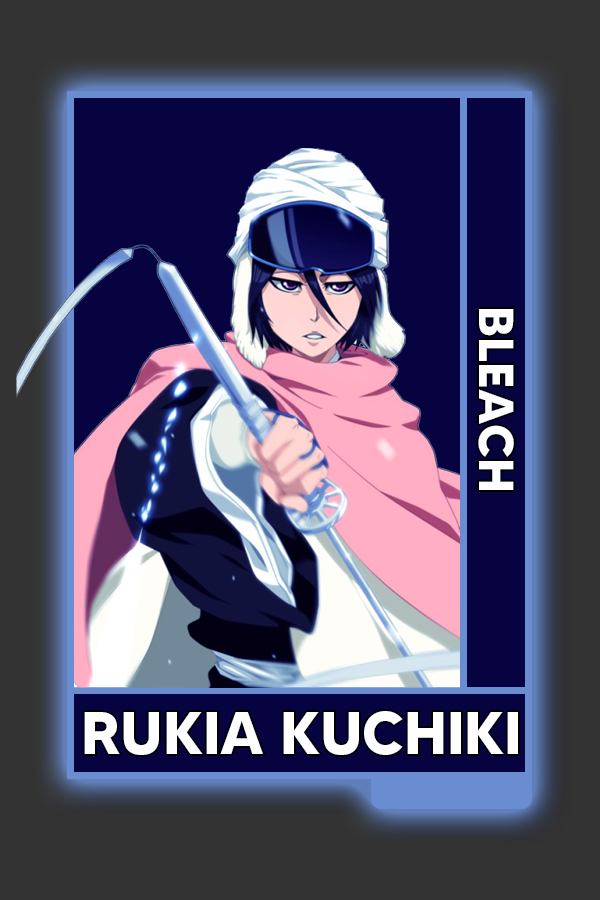
<style>
.page{position:relative;width:600px;height:900px;background:#333333}
.page>*{position:absolute;margin:0}
.t1{font:48.8px "MADETOMMY-Bold";color:#fefefe}
.t2{font:60.3px "MADETOMMY-Bold";color:#fefefe}
</style>
<div class="page">
<p class="t1" style="left:478px;top:309px;width:36px;height:181px;rotate:90deg">BLEACH</p>
<p class="t2" style="left:84px;top:711px;width:434px;height:44px">RUKIA KUCHIKI</p>
</div>
